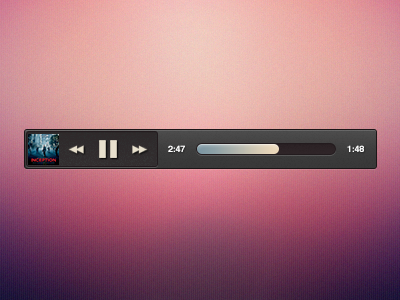
<style>
.page{position:relative;width:400px;height:300px}
.page>*{position:absolute;margin:0}
.t1{font:9px "Helvetica-Bold";letter-spacing:-0.025em;color:#ffffff}
</style>
<div class="page">
<p class="t1" style="left:168px;top:145px;width:17px;height:7px">2:47</p>
<p class="t1" style="left:347px;top:145px;width:17px;height:7px">1:48</p>
</div>
